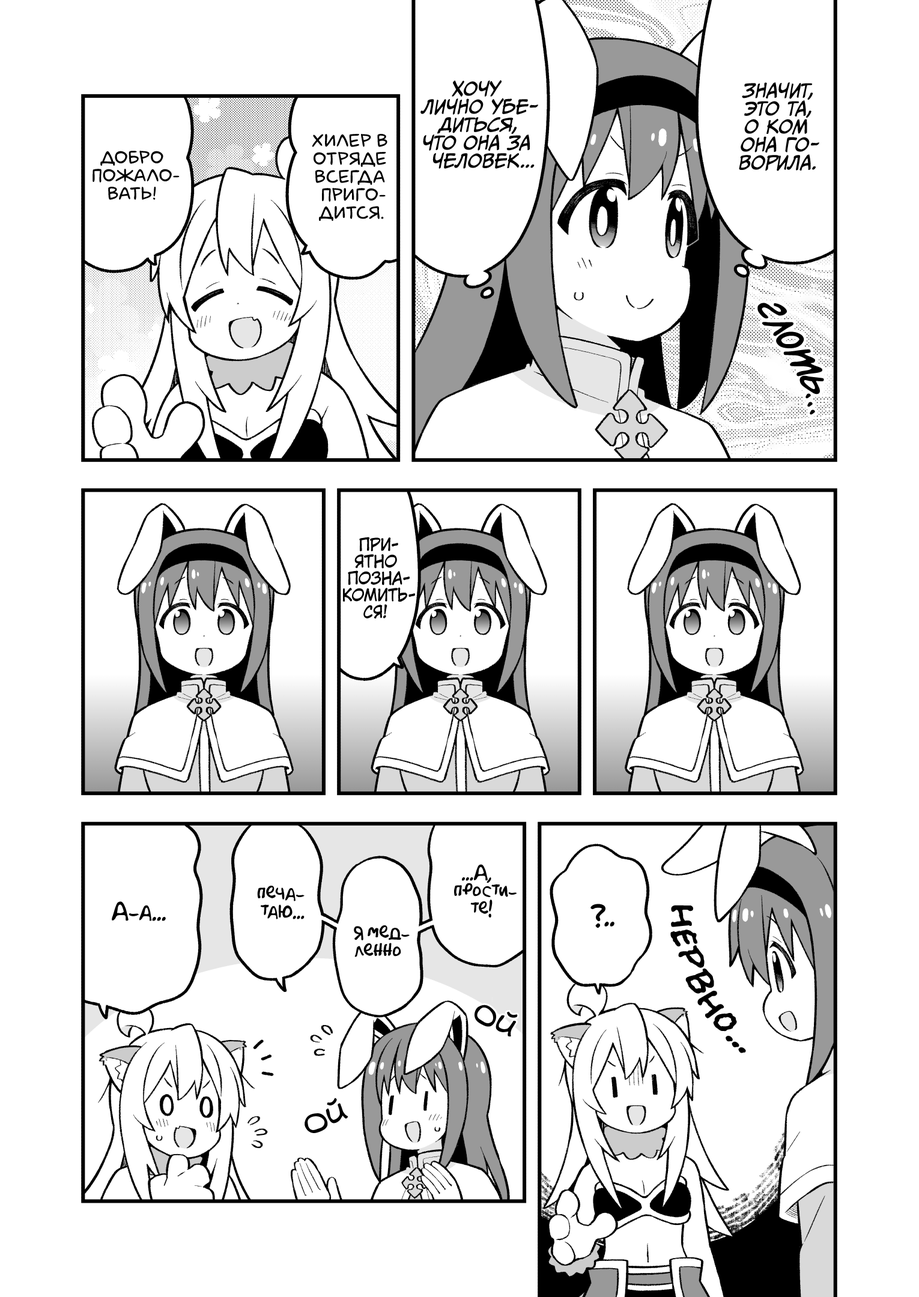
<style>
.page{position:relative;width:919px;height:1297px;background:#ffffff}
.page>*{position:absolute;margin:0}
.t1{font:18px "CCMeanwhile";color:#000000;text-transform:uppercase;font-style:italic}
.t2{font:18px "laCartoonerie";color:#000000;text-transform:uppercase}
.t3{font:45.1px "v_CCDearDiary";color:#000000}
.t4{font:28.8px "v_CCDearDiary";color:#000000}
.t5{font:16.8px "KuraiVoice2";color:#000000;text-transform:uppercase;scale:0.95 1}
.t6{font:18px "AkbarPlain";color:#000000}
.t7{font:21.6px "AkbarPlain";color:#000000}
.t8{font:25.2px "AkbarPlain";color:#000000}
.t9{font:36px "el_CCEvilSchemes";color:#000000;text-transform:uppercase;scale:0.95 1}
.t10{font:36px "v_Augie";color:#000000}
</style>
<div class="page">
<p class="t1" style="left:420px;top:80px;width:118px;height:89px;text-align:center">Хочу<br>лично убе-<br>диться,<br>что она за<br>человек...</p>
<p class="t1" style="left:739px;top:82px;width:80px;height:89px;text-align:center">Значит,<br>это та,<br>о ком<br>она го-<br>ворила.</p>
<p class="t2" style="left:312px;top:134px;width:75px;height:87px;text-align:center">Хилер в<br>отряде<br>всегда<br>приго-<br>дится.</p>
<p class="t2" style="left:93px;top:151px;width:87px;height:49px;text-align:center">Добро<br>пожало-<br>вать!</p>
<p class="t3" style="left:757px;top:303px;width:30px;height:16px;rotate:63deg">г</p>
<p class="t3" style="left:762px;top:322px;width:32px;height:14px;rotate:50deg">л</p>
<p class="t3" style="left:776px;top:332px;width:28px;height:16px;rotate:49deg">о</p>
<p class="t3" style="left:783px;top:349px;width:39px;height:28px;rotate:61deg">т</p>
<p class="t3" style="left:800px;top:375px;width:24px;height:20px;rotate:72deg">ь</p>
<p class="t4" style="left:806px;top:393px;width:5px;height:6px">.</p>
<p class="t4" style="left:807px;top:402px;width:6px;height:5px">.</p>
<p class="t4" style="left:810px;top:410px;width:5px;height:5px">.</p>
<p class="t5" style="left:342px;top:537px;width:73px;height:82px;text-align:center">При-<br>ятно<br>позна-<br>комить-<br>ся!</p>
<p class="t6" style="left:454px;top:864px;width:63px;height:54px;text-align:center">...А,<br>прости-<br>те!</p>
<p class="t6" style="left:257px;top:886px;width:48px;height:34px;text-align:center">печа-<br>таю...</p>
<p class="t7" style="left:112px;top:902px;width:54px;height:19px">А-а...</p>
<p class="t8" style="left:590px;top:904px;width:24px;height:25px">?..</p>
<p class="t9" style="left:670px;top:905px;width:76px;height:149px;rotate:64deg">нервно...</p>
<p class="t6" style="left:354px;top:926px;width:56px;height:31px;text-align:center">Я мед-<br>ленно</p>
<p class="t10" style="left:475px;top:1005px;width:43px;height:32px;rotate:25deg">ой</p>
<p class="t10" style="left:305px;top:1098px;width:43px;height:35px;rotate:-26deg">ой</p>
</div>
